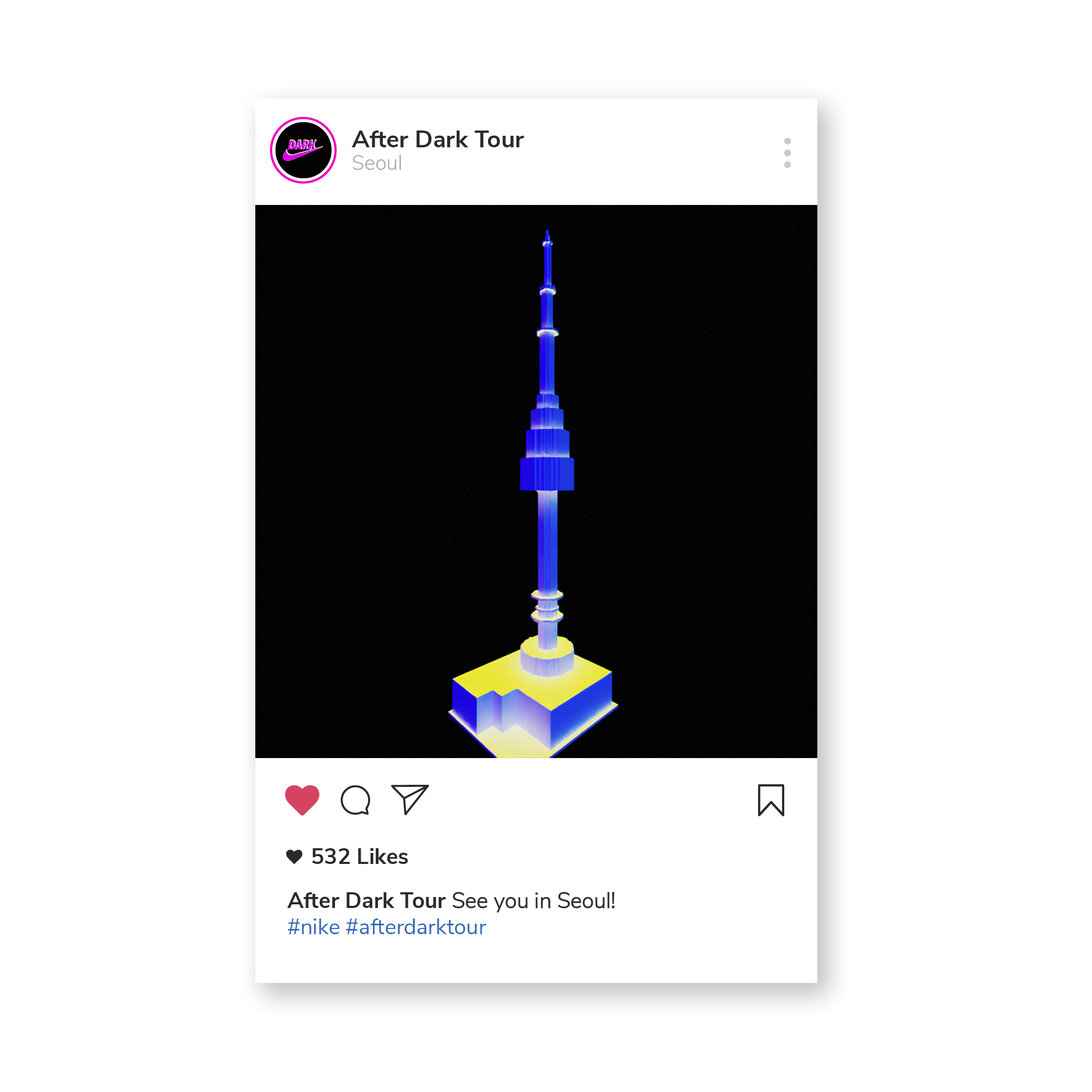
<style>
.page{position:relative;width:1092px;height:1092px;background:#ffffff}
.page>*{position:absolute;margin:0}
.t1{font:24px "NunitoSans-Bold";color:#2a2a2a}
.t2{font:20.7px "NunitoSans-Light";color:#a5a5a5}
.t3{font:22.1px "NunitoSans-Bold";color:#2a2a2a}
.t4{font:21.9px "NunitoSans-Regular";color:#356bb4}
.t5{font:21.9px "NunitoSans-Light";color:#2a2a2a}
</style>
<div class="page">
<p class="t1" style="left:352px;top:131px;width:172px;height:16px">After Dark Tour</p>
<p class="t2" style="left:352px;top:155px;width:49px;height:15px">Seoul</p>
<p class="t3" style="left:312px;top:848px;width:96px;height:16px">532 Likes</p>
<p class="t4" style="left:287px;top:892px;width:327px;height:42px"><span class="t3">After Dark Tour </span><span class="t5">See you in Seoul!<br></span>#nike #afterdarktour</p>
</div>
